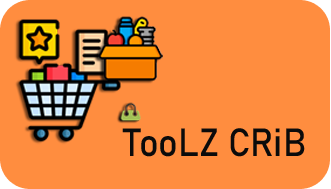
<style>
.page{position:relative;width:331px;height:189px;background:#ff8d3f}
.page>*{position:absolute;margin:0}
.t1{font:38.6px "Bahnschrift";color:#0b0b0b;scale:0.94 1}
</style>
<div class="page">
<p class="t1" style="left:122px;top:128px;width:183px;height:29px">TooLZ CRiB</p>
</div>
